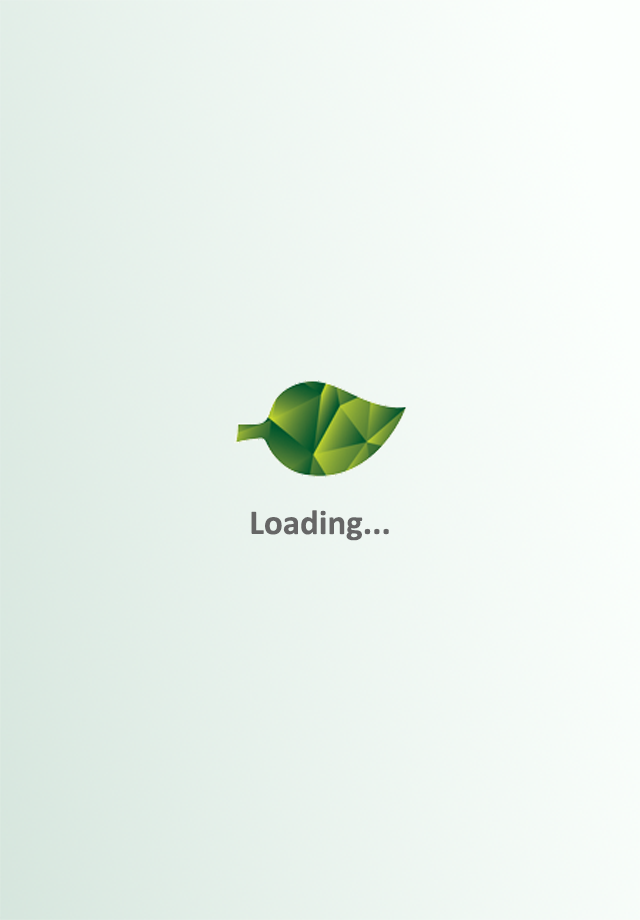
<style>
.page{position:relative;width:640px;height:920px}
.page>*{position:absolute;margin:0}
.t1{font:35px "Calibri-Bold";color:#666666}
</style>
<div class="page">
<p class="t1" style="left:251px;top:510px;width:138px;height:31px">Loading...</p>
</div>
